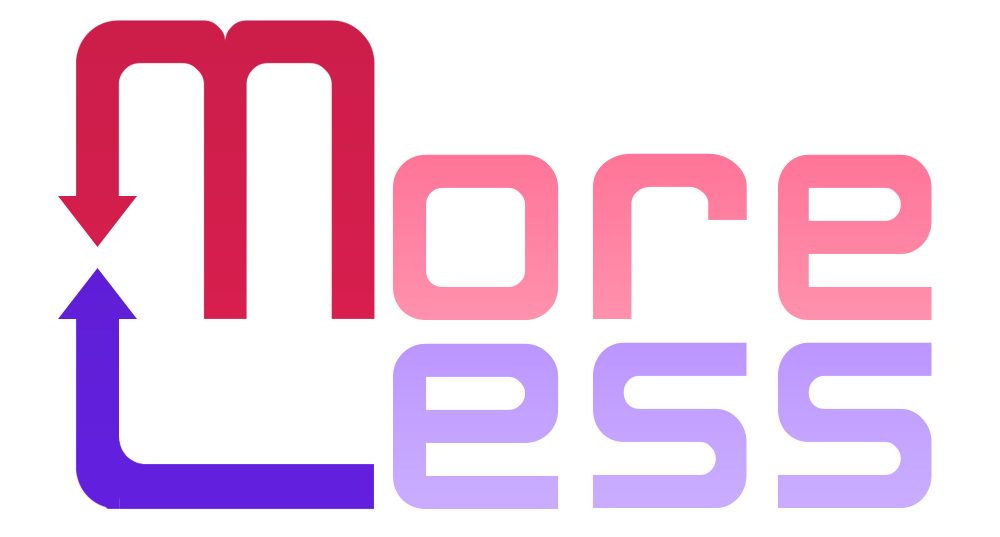
<style>
.page{position:relative;width:1000px;height:537px;background:#ffffff}
.page>*{position:absolute;margin:0}
.t1{font:528.6px "NeonNanoborg";color:#ff83a3}
.t2{font:528.6px "NeonNanoborg";color:#ff7c9d;scale:1.16 1}
.t3{font:528.6px "NeonNanoborg";color:#ff82a2;scale:0.93 1}
.t4{font:528.6px "NeonNanoborg";color:#c3a3ff;scale:0.93 1}
.t5{font:528.6px "NeonNanoborg";color:#c3a2ff}
</style>
<div class="page">
<p class="t1" style="left:393px;top:154px;width:166px;height:166px">o</p>
<p class="t2" style="left:593px;top:153px;width:154px;height:166px">r</p>
<p class="t3" style="left:778px;top:154px;width:154px;height:166px">e</p>
<p class="t4" style="left:593px;top:342px;width:154px;height:166px">s</p>
<p class="t4" style="left:778px;top:342px;width:154px;height:166px">s</p>
<p class="t5" style="left:393px;top:343px;width:166px;height:166px">e</p>
</div>
